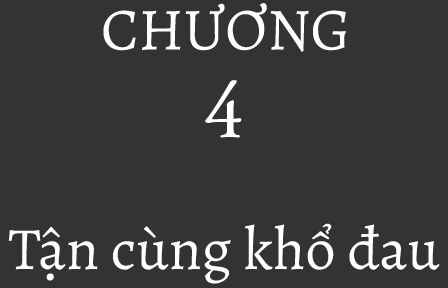
<style>
.page{position:relative;width:448px;height:288px;background:#333333}
.page>*{position:absolute;margin:0}
.t1{font:60px "Alegreya-Regular";color:#ffffff}
</style>
<div class="page">
<p class="t1" style="left:103px;top:3px;width:243px;height:49px">CHƯƠNG</p>
<p class="t1" style="left:8px;top:223px;width:432px;height:61px">Tận cùng khổ đau</p>
</div>
